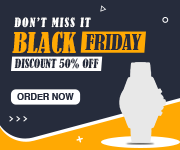
<style>
.page{position:relative;width:180px;height:150px;background:#262c3c}
.page>*{position:absolute;margin:0}
.t1{font:11.7px "BernardMT-Condensed";letter-spacing:0.11em;color:#ffffff}
.t2{font:26.9px "BernardMT-Condensed";color:#ffa903}
.t3{font:20.4px "BernardMT-Condensed";color:#262c3c}
.t4{font:11.7px "BernardMT-Condensed";color:#262c3c}
.t5{font:9.2px "Helvetica-Bold";color:#262c3c}
</style>
<div class="page">
<p class="t1" style="left:14px;top:17px;width:77px;height:11px">DON’T MISS IT</p>
<p class="t2" style="left:12px;top:31px;width:64px;height:23px">BLACK</p>
<p class="t3" style="left:85px;top:34px;width:57px;height:16px">FRIDAY</p>
<p class="t4" style="left:14px;top:58px;width:85px;height:11px">DISCOUNT 50% OFF</p>
<p class="t5" style="left:17px;top:93px;width:57px;height:7px">ORDER NOW</p>
</div>
